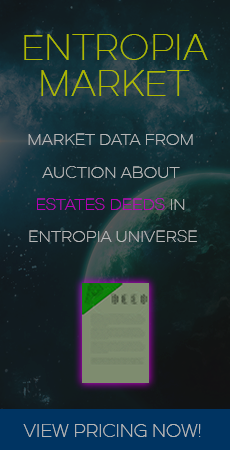
<style>
.page{position:relative;width:230px;height:450px}
.page>*{position:absolute;margin:0}
.t1{font:36px/36px "Dual-300";color:#afb700;text-transform:uppercase}
.t2{font:16.1px/32.3px "Dual-300";color:#b7b7b7;text-transform:uppercase}
.t3{font:18px "Dual-300";color:#b7b7b7;text-transform:uppercase}
</style>
<div class="page">
<p class="t1" style="left:24px;top:34px;width:184px;height:62px;text-align:center">ENtropia<br>Market</p>
<p class="t2" style="left:28px;top:133px;width:169px;height:109px;text-align:center">Market data from <br>auction about <br>estates deeds in <br>Entropia Universe</p>
<p class="t3" style="left:23px;top:424px;width:178px;height:13px">view pricing now!</p>
</div>
